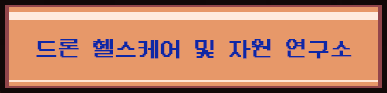
<style>
.page{position:relative;width:387px;height:93px;background:#e79869}
.page>*{position:absolute;margin:0}
.t1{font:22px "DungGeunMo";color:#0e27a5;font-weight:bold}
</style>
<div class="page">
<p class="t1" style="left:36px;top:39px;width:316px;height:20px">드론 헬스케어 및 자원 연구소</p>
</div>
